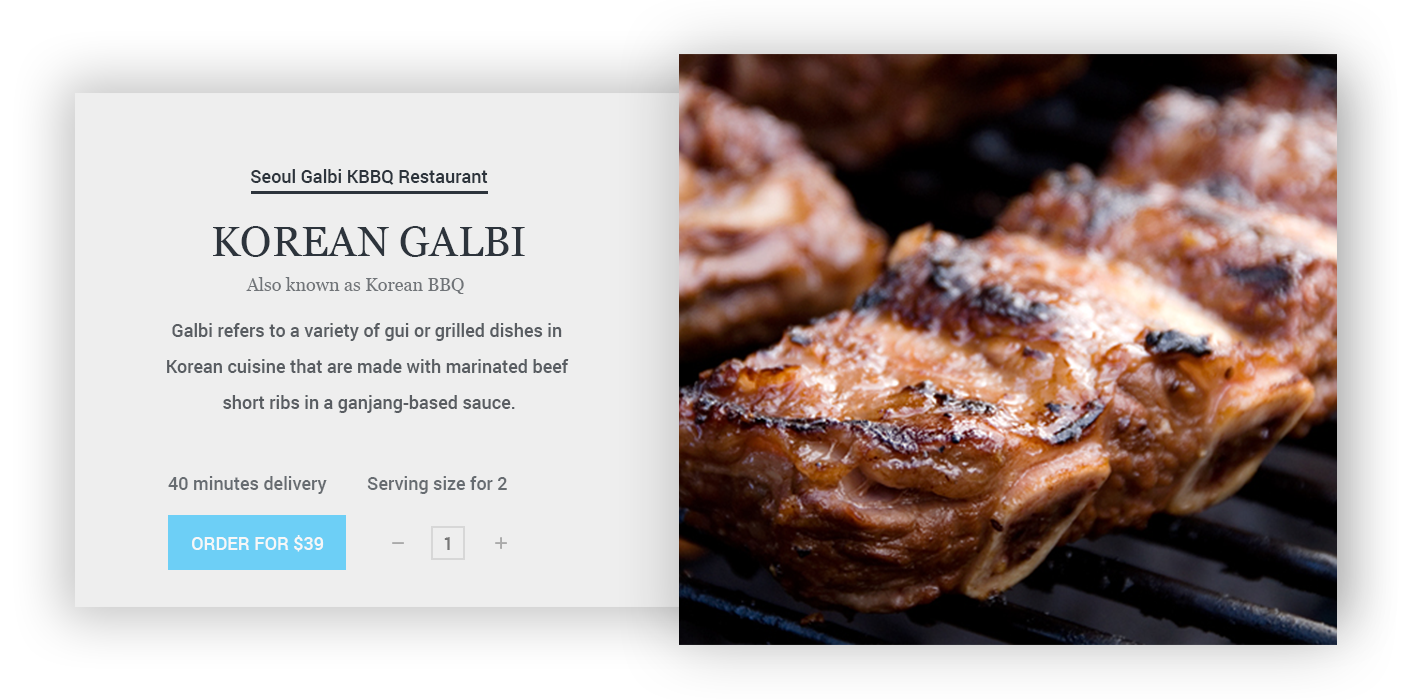
<style>
.page{position:relative;width:1412px;height:700px;background:#eeeeee}
.page>*{position:absolute;margin:0}
.t1{font:18px "Roboto-Medium";color:#2d343c}
.t2{font:42px "Georgia";color:#2d343c}
.t3{font:18px "Georgia";color:#707478}
.t4{font:18px/36px "Roboto-Medium";color:#595d62}
.t5{font:18px "Roboto-Medium";color:#676c71}
.t6{font:18px "Roboto-Medium";color:#f7f7f7}
.t7{font:18px "Roboto-Medium";color:#777777}
</style>
<div class="page">
<p class="t1" style="left:251px;top:169px;width:237px;height:16px">Seoul Galbi KBBQ Restaurant</p>
<p class="t2" style="left:213px;top:226px;width:312px;height:31px">KOREAN GALBI</p>
<p class="t3" style="left:246px;top:277px;width:218px;height:17px">Also known as Korean BBQ</p>
<p class="t4" style="left:167px;top:323px;width:402px;height:90px;text-align:center">Galbi refers to a variety of gui or grilled dishes in <br>Korean cuisine that are made with marinated beef <br>short ribs in a ganjang-based sauce.</p>
<p class="t5" style="left:168px;top:476px;width:159px;height:18px">40 minutes delivery</p>
<p class="t5" style="left:367px;top:476px;width:140px;height:18px">Serving size for 2</p>
<p class="t6" style="left:192px;top:535px;width:132px;height:17px">ORDER FOR $39</p>
<p class="t7" style="left:444px;top:537px;width:6px;height:13px">1</p>
</div>
